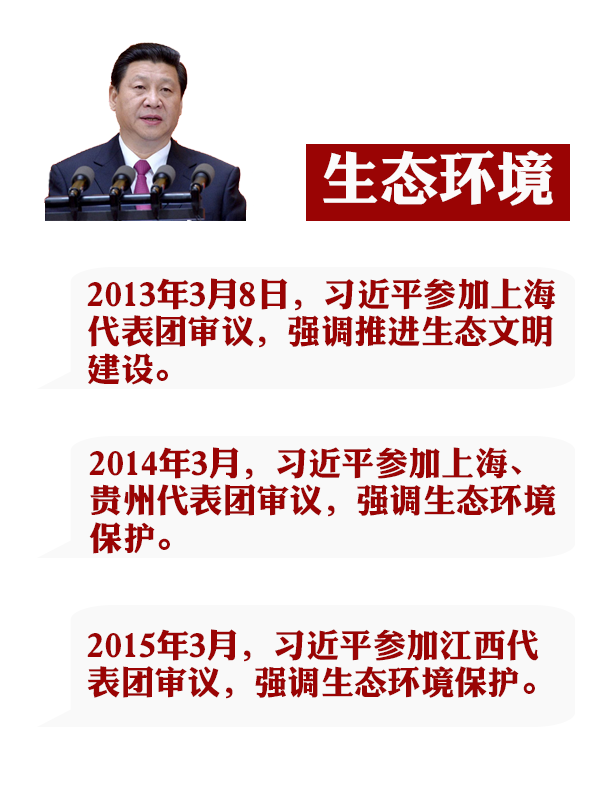
<style>
.page{position:relative;width:600px;height:800px;background:#ffffff}
.page>*{position:absolute;margin:0}
.t1{font:58.3px "DFLiJinHeiW8";color:#fbfbfb}
.t2{font:33.3px/37.5px "DFLiJinHeiW8";color:#9a0404}
</style>
<div class="page">
<p class="t1" style="left:323px;top:150px;width:230px;height:56px">生态环境</p>
<p class="t2" style="left:87px;top:278px;width:469px;height:107px">2013年3月8日，习近平参加上海代表团审议，强调推进生态文明建设。</p>
<p class="t2" style="left:89px;top:447px;width:467px;height:107px">2014年3月，习近平参加上海、贵州代表团审议，强调生态环境保护。</p>
<p class="t2" style="left:87px;top:629px;width:452px;height:70px">2015年3月，习近平参加江西代表团审议，强调生态环境保护。</p>
</div>
